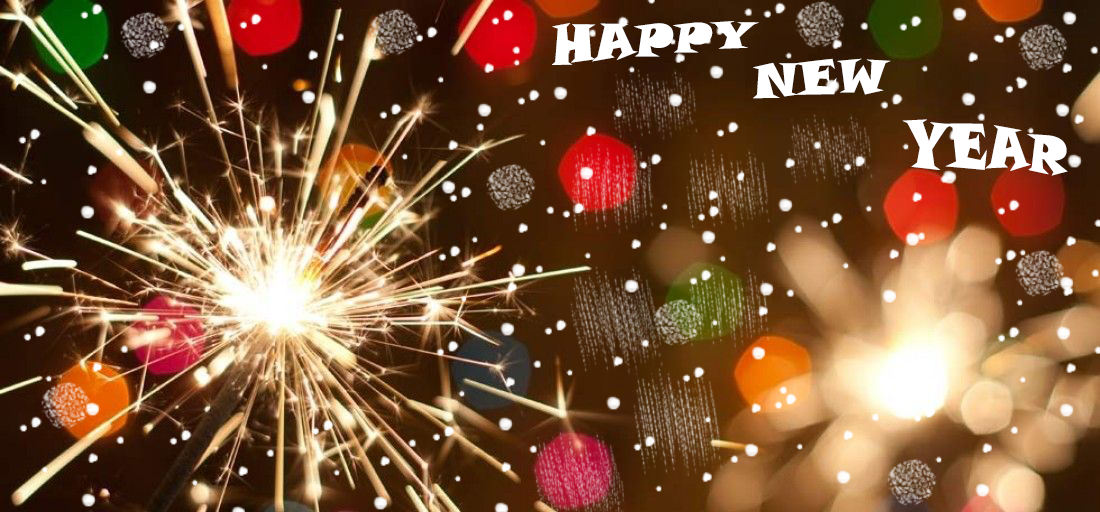
<style>
.page{position:relative;width:1100px;height:512px}
.page>*{position:absolute;margin:0}
.t1{font:48px "SnapITC-Regular";color:#ffffff}
</style>
<div class="page">
<p class="t1" style="left:552px;top:21px;width:516px;height:155px;text-align:center">HAPPY <br>                   NEW<br>                                   YEAR</p>
</div>
